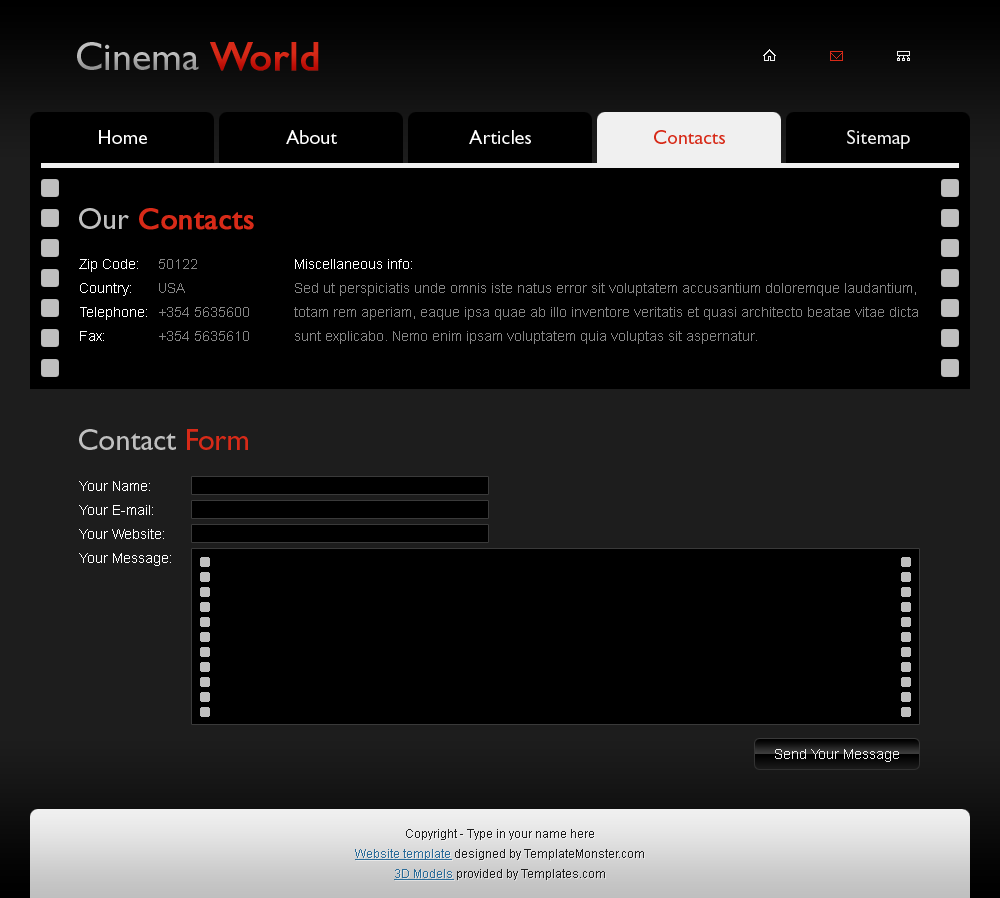
<style>
.page{position:relative;width:1000px;height:898px;background:#000000}
.page>*{position:absolute;margin:0}
.t1{font:40px "GillSans";color:#bfbfbf}
.t2{font:40px "GillSans";color:#d72a18;font-weight:bold}
.t3{font:20px "GillSans";color:#ffffff}
.t4{font:20px "GillSans";color:#d72a18}
.t5{font:20px "GillSans";color:#f0f0f0}
.t6{font:30px "GillSans";color:#d72a18;font-weight:bold}
.t7{font:30px "GillSans";color:#bfbfbf}
.t8{font:14px/24px "ArialMT";color:#ffffff}
.t9{font:14px/24px "ArialMT";color:#858585}
.t10{font:30px "GillSans";color:#d72a18}
.t11{font:14px "ArialMT";color:#f0f0f0}
.t12{font:12px/20px "ArialMT";color:#1d1d1d}
.t13{font:12px/20px "ArialMT";color:#2c6d9a;text-decoration:underline}
</style>
<div class="page">
<p class="t1" style="left:77px;top:42px;width:242px;height:29px">Cinema <span class="t2">World</span></p>
<p class="t3" style="left:99px;top:130px;width:48px;height:14px">Home</p>
<p class="t3" style="left:286px;top:130px;width:52px;height:14px">About          Articles          Contacts          Site map</p>
<p class="t3" style="left:469px;top:130px;width:62px;height:14px">Articles          Contacts          Site map</p>
<p class="t4" style="left:654px;top:130px;width:71px;height:14px">Contacts          Site map</p>
<p class="t5" style="left:847px;top:130px;width:63px;height:19px">Sitemap</p>
<p class="t6" style="left:79px;top:208px;width:175px;height:22px"><span class="t7">Our</span> Contacts</p>
<p class="t8" style="left:79px;top:259px;width:68px;height:82px">Zip Code:<br>Country:<br>Telephone:<br>Fax:</p>
<p class="t9" style="left:159px;top:259px;width:90px;height:82px">50122<br>USA <br>+354 5635600<br>+354 5635610</p>
<p class="t9" style="left:294px;top:259px;width:624px;height:85px"><span class="t8">Miscellaneous info:<br></span>Sed ut perspiciatis unde omnis iste natus error sit voluptatem accusantium doloremque laudantium, totam rem aperiam, eaque ipsa quae ab illo inventore veritatis et quasi architecto beatae vitae dicta sunt explicabo. Nemo enim ipsam voluptatem quia voluptas sit aspernatur.</p>
<p class="t7" style="left:79px;top:429px;width:169px;height:21px">Contact<span class="t10"> Form</span></p>
<p class="t8" style="left:79px;top:481px;width:92px;height:85px">Your Name:<br>Your E-mail:<br>Your Website:<br>Your Message:</p>
<p class="t11" style="left:775px;top:749px;width:124px;height:13px">Send Your Message</p>
<p class="t12" style="left:355px;top:829px;width:289px;height:51px;text-align:center">Copyright - Type in your name here<br><span class="t13">Website template</span> designed by TemplateMonster.com<br><span class="t13">3D Models</span> provided by Templates.com</p>
</div>
